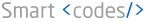
<style>
.page{position:relative;width:147px;height:21px;background:#ffffff}
.page>*{position:absolute;margin:0}
.t1{font:20.8px "NeoSans";color:#9c9c9c}
.t2{font:20.8px "NeoSans";color:#0968c1}
</style>
<div class="page">
<p class="t1" style="left:2px;top:2px;width:141px;height:16px">Smart <span class="t2">&lt;</span>codes<span class="t2">/&gt;</span></p>
</div>
